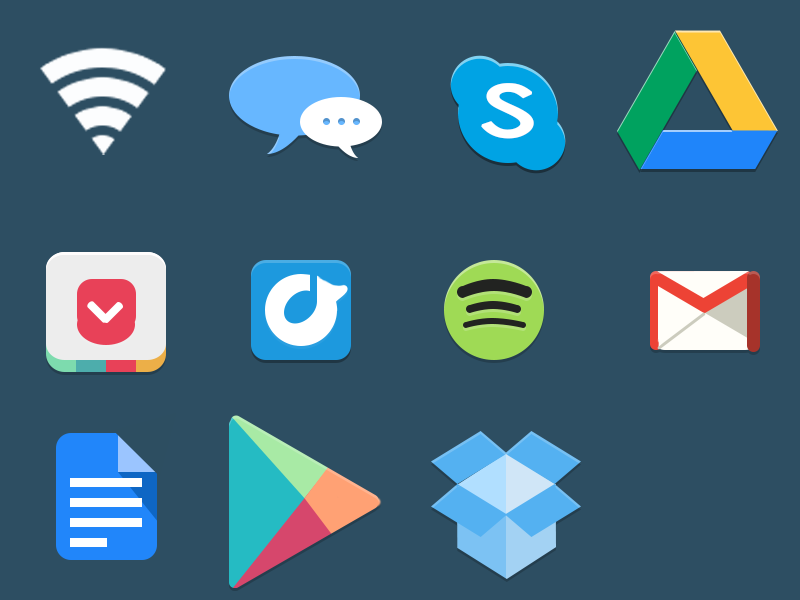
<style>
.page{position:relative;width:800px;height:600px;background:#2d4e62}
.page>*{position:absolute;margin:0}
.t1{font:67.8px "STHeitiSC-Medium";color:#ffffff;font-weight:bold;scale:1.68 1}
</style>
<div class="page">
<p class="t1" style="left:481px;top:83px;width:53px;height:56px">S</p>
</div>
